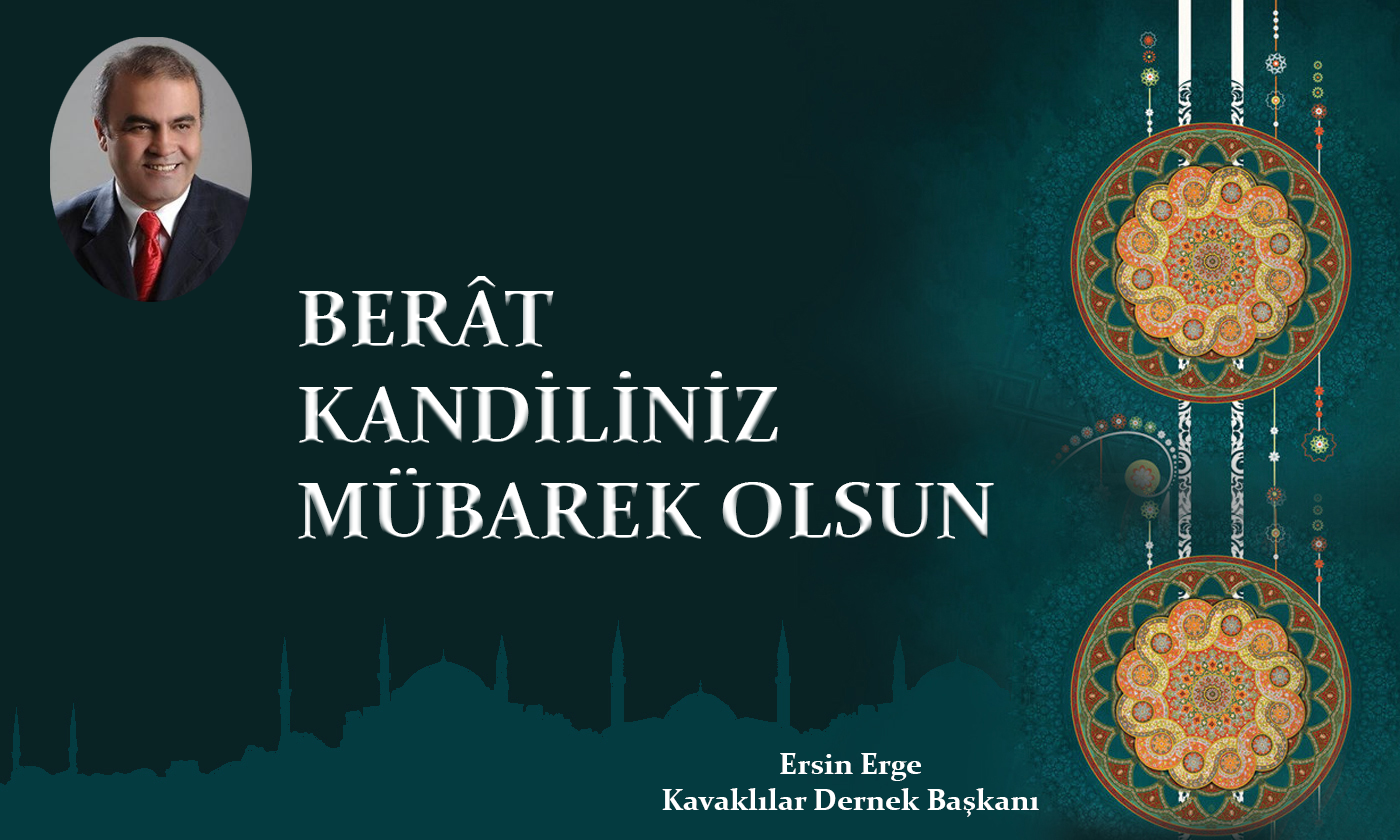
<style>
.page{position:relative;width:1400px;height:840px;background:#092324}
.page>*{position:absolute;margin:0}
.t1{font:80px "Constantia-Bold"}
.t2{font:30px "Constantia-Bold";color:#ffffff}
</style>
<div class="page">
<p class="t1" style="left:298px;top:276px;width:696px;height:264px">BERÂT<br>KANDİLİNİZ<br>MÜBAREK OLSUN</p>
<p class="t2" style="left:662px;top:753px;width:377px;height:64px;text-align:center">Ersin Erge<br>Kavaklılar Dernek Başkanı</p>
</div>
